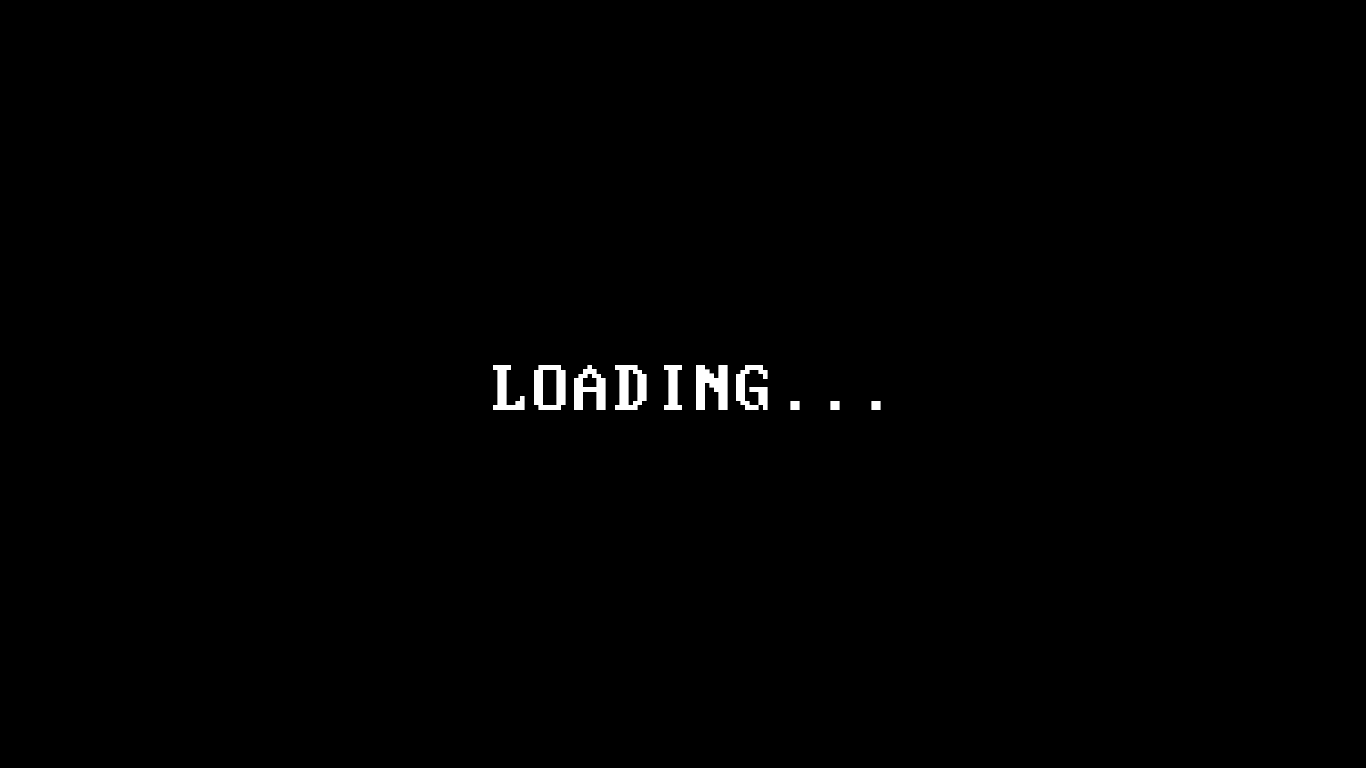
<style>
.page{position:relative;width:1366px;height:768px;background:#000000}
.page>*{position:absolute;margin:0}
.t1{font:72px "PerfectDOSVGA437";color:#ffffff}
</style>
<div class="page">
<p class="t1" style="left:493px;top:365px;width:388px;height:45px">LOADING...</p>
</div>
